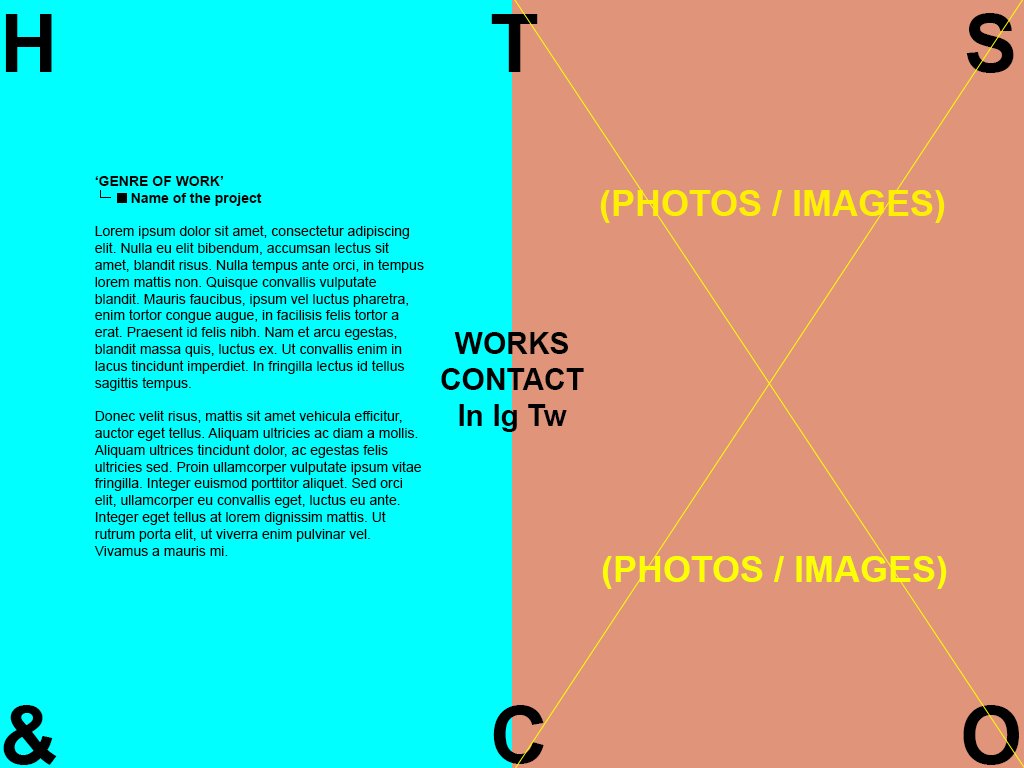
<style>
.page{position:relative;width:1024px;height:768px;background:#e0957a}
.page>*{position:absolute;margin:0}
.t1{font:80px "Arial-BoldMT";color:#000000}
.t2{font:14px "ArialMT";color:#000000}
.t3{font:14px "Arial-BoldMT";color:#000000}
.t4{font:36px "Arial-BoldMT";color:#fff000}
.t5{font:30px "Arial-BoldMT";color:#000000}
.t6{font:36px "Arial-BoldMT";color:#fcff00}
</style>
<div class="page">
<p class="t1" style="left:5px;top:13px;width:1009px;height:60px">H             T              S</p>
<p class="t2" style="left:94px;top:176px;width:330px;height:380px"><span class="t3">‘GENRE OF WORK’<br> Name of the project<br><br></span>Lorem ipsum dolor sit amet, consectetur adipiscing elit. Nulla eu elit bibendum, accumsan lectus sit amet, blandit risus. Nulla tempus ante orci, in tempus lorem mattis non. Quisque convallis vulputate blandit. Mauris faucibus, ipsum vel luctus pharetra, enim tortor congue augue, in facilisis felis tortor a erat. Praesent id felis nibh. Nam et arcu egestas, blandit massa quis, luctus ex. Ut convallis enim in lacus tincidunt imperdiet. In fringilla lectus id tellus sagittis tempus.<br><br>Donec velit risus, mattis sit amet vehicula efficitur, auctor eget tellus. Aliquam ultricies ac diam a mollis. Aliquam ultrices tincidunt dolor, ac egestas felis ultricies sed. Proin ullamcorper vulputate ipsum vitae fringilla. Integer euismod porttitor aliquet. Sed orci elit, ullamcorper eu convallis eget, luctus eu ante. Integer eget tellus at lorem dignissim mattis. Ut rutrum porta elit, ut viverra enim pulvinar vel. Vivamus a mauris mi.</p>
<p class="t4" style="left:600px;top:190px;width:345px;height:33px">(PHOTOS / IMAGES)</p>
<p class="t5" style="left:441px;top:332px;width:143px;height:100px;text-align:center">WORKS<br>CONTACT<br>In Ig Tw</p>
<p class="t6" style="left:602px;top:556px;width:345px;height:33px">(PHOTOS / IMAGES)</p>
<p class="t1" style="left:3px;top:705px;width:1016px;height:60px">&amp;             C            O</p>
</div>
